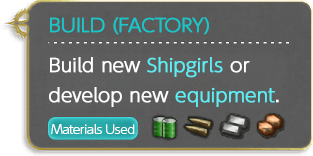
<style>
.page{position:relative;width:313px;height:156px}
.page>*{position:absolute;margin:0}
.t1{font:18px/40px "UDShinGoPro-Light";color:#14c9cb;font-weight:bold}
.t2{font:18px/40px "UDShinGoPro-Light";color:#ffffff;font-weight:bold}
.t3{font:18px/40px "UDShinGoPro-Light";color:#5eedf3;font-weight:bold}
.t4{font:18px/30px "UDShinGoPro-Light";color:#ffffff;font-weight:bold}
.t5{font:18px/30px "UDShinGoPro-Light";color:#5eedf3;font-weight:bold}
.t6{font:12px "UDShinGoPro-Light";letter-spacing:-0.04em;color:#ffffff}
</style>
<div class="page">
<p class="t1" style="left:49px;top:17px;width:230px;height:90px">BUILD (FACTORY)<br><span class="t2">Build new </span><span class="t3">Shipgirls</span><span class="t2"> or<br></span><span class="t4">develop new </span><span class="t5">equipment</span><span class="t4">.</span></p>
<p class="t6" style="left:51px;top:124px;width:84px;height:10px">Materials Used</p>
</div>
